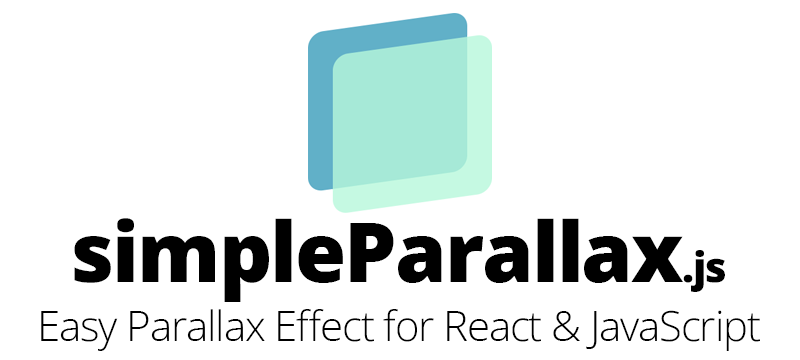
<style>
.page{position:relative;width:800px;height:360px;background:#ffffff}
.page>*{position:absolute;margin:0}
.t1{font:83.3px "OpenSans-ExtraBold";letter-spacing:-0.025em;color:#000000}
.t2{font:41.7px "OpenSans-ExtraBold";letter-spacing:-0.025em;color:#000000}
.t3{font:41.7px "OpenSans-Light";letter-spacing:-0.025em;color:#000000}
</style>
<div class="page">
<p class="t1" style="left:74px;top:218px;width:651px;height:84px">simpleParallax<span class="t2">.js</span></p>
<p class="t3" style="left:41px;top:309px;width:719px;height:42px">Easy Parallax Effect for React &amp; JavaScript</p>
</div>
